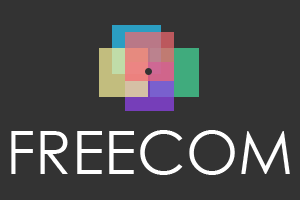
<style>
.page{position:relative;width:300px;height:200px;background:#333333}
.page>*{position:absolute;margin:0}
.t1{font:60.3px "CenturyGothic";color:#ffffff}
</style>
<div class="page">
<p class="t1" style="left:11px;top:130px;width:279px;height:45px">FREECOM</p>
</div>
